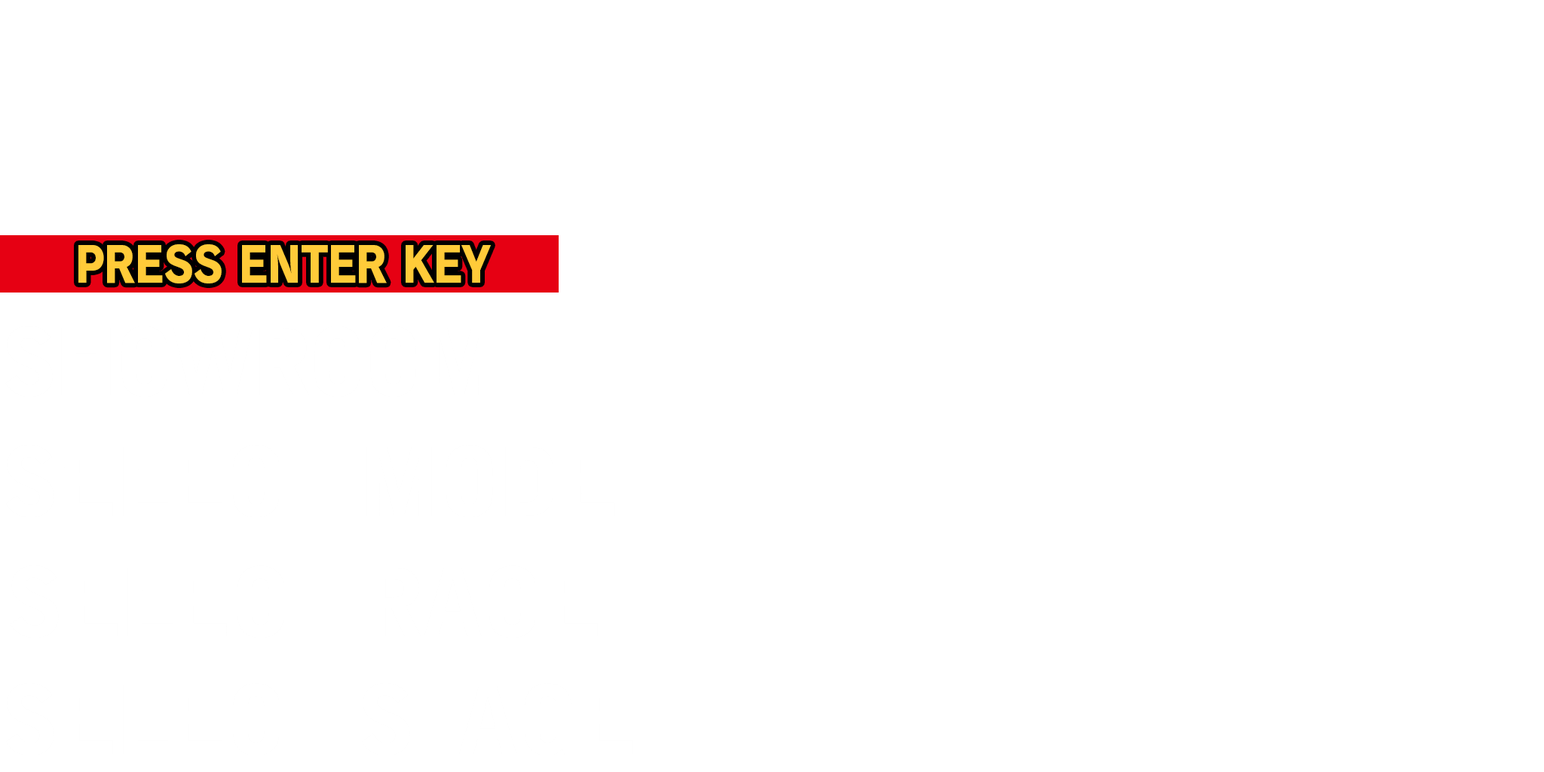
<style>
.page{position:relative;width:1544px;height:772px;background:#ffffff}
.page>*{position:absolute;margin:0}
.t1{font:48.3px "RodinPro-EB";letter-spacing:-0.01em;color:#ffcb39;scale:0.9 1}
</style>
<div class="page">
<p class="t1" style="left:78px;top:244px;width:413px;height:40px">PRESS ENTER KEY</p>
</div>
